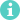
<style>
.page{position:relative;width:20px;height:20px;background:#55cdc3}
.page>*{position:absolute;margin:0}
.t1{font:19.7px "Baskerville-Bold";color:#ffffff}
</style>
<div class="page">
<p class="t1" style="left:7px;top:2px;width:7px;height:14px">i</p>
</div>
